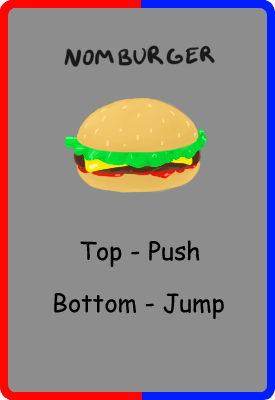
<style>
.page{position:relative;width:275px;height:400px;background:#8d8d8d}
.page>*{position:absolute;margin:0}
.t1{font:25px "ComicSansMS";color:#000000}
</style>
<div class="page">
<p class="t1" style="left:80px;top:240px;width:120px;height:27px">Top - Push</p>
<p class="t1" style="left:54px;top:293px;width:170px;height:26px">Bottom - Jump</p>
</div>
